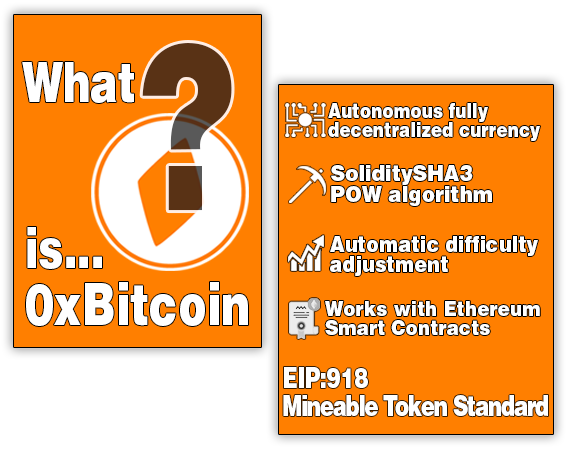
<style>
.page{position:relative;width:570px;height:449px;background:#ff7f00}
.page>*{position:absolute;margin:0}
.t1{font:226.6px "Helvetica-Black";letter-spacing:0.02em;color:#593215;scale:0.71 1}
.t2{font:55.2px "Helvetica-Black";color:#ffffff;scale:0.75 1}
.t3{font:20.7px/19.8px "Helvetica-Black";color:#ffffff;scale:0.81 1}
.t4{font:21.9px/21px "Helvetica-Black";color:#ffffff;scale:0.91 1}
.t5{font:21.1px/20.2px "Helvetica-Black";color:#ffffff;scale:0.91 1}
.t6{font:57.8px "Helvetica-Black";color:#ffffff;scale:0.75 1}
.t7{font:20.6px/19.7px "Helvetica-Black";color:#ffffff;scale:0.89 1}
.t8{font:27.8px/28.1px "Helvetica-Black";letter-spacing:-0.06em;color:#ffffff;scale:0.77 1}
.t9{font:27.8px/28.1px "Helvetica-Black";letter-spacing:-0.02em;color:#ffffff;scale:0.77 1}
</style>
<div class="page">
<p class="t1" style="left:142px;top:43px;width:90px;height:168px">?</p>
<p class="t2" style="left:22px;top:62px;width:112px;height:41px">What</p>
<p class="t3" style="left:328px;top:103px;width:212px;height:38px">Autonomous fully<br>decentralized currency</p>
<p class="t4" style="left:331px;top:165px;width:161px;height:41px">SoliditySHA3 <br>POW algorithm</p>
<p class="t2" style="left:27px;top:227px;width:75px;height:42px">is...</p>
<p class="t5" style="left:330px;top:236px;width:208px;height:40px">Automatic difficulty<br>adjustment</p>
<p class="t6" style="left:26px;top:282px;width:222px;height:44px">0xBitcoin</p>
<p class="t7" style="left:325px;top:301px;width:215px;height:34px">Works with Ethereum<br>Smart Contracts</p>
<p class="t8" style="left:283px;top:367px;width:265px;height:50px"><span class="t9">EIP:918<br></span>Mineable Token Standard</p>
</div>
